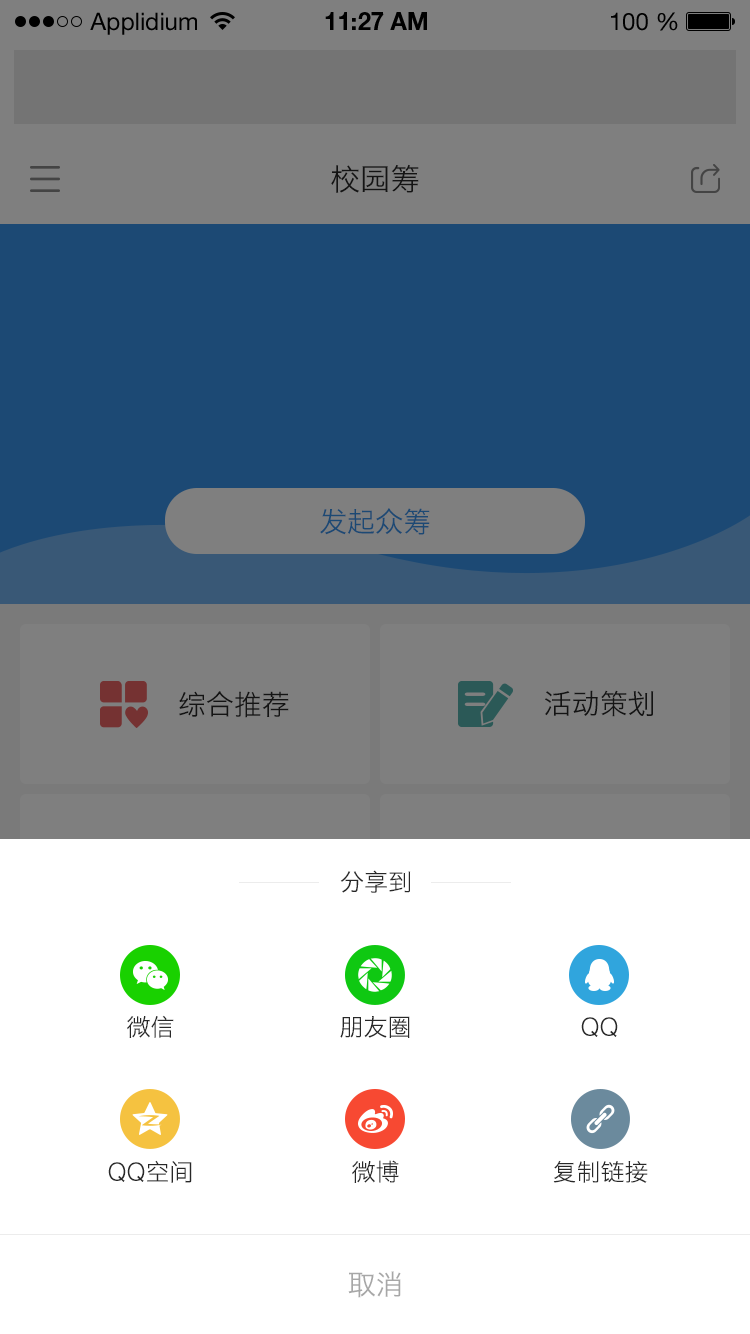
<style>
.page{position:relative;width:750px;height:1334px;background:#ffffff}
.page>*{position:absolute;margin:0}
.t1{font:24px "HiraginoSansGB-W3";color:#282828}
.t2{font:28px "HiraginoSansGB-W3";color:#a7a7a7}
</style>
<div class="page">
<p class="t1" style="left:340px;top:870px;width:71px;height:23px">分享到</p>
<p class="t1" style="left:127px;top:1015px;width:47px;height:23px">微信</p>
<p class="t1" style="left:340px;top:1016px;width:70px;height:22px">朋友圈</p>
<p class="t1" style="left:581px;top:1017px;width:37px;height:20px">QQ</p>
<p class="t1" style="left:108px;top:1160px;width:84px;height:23px">QQ空间</p>
<p class="t1" style="left:352px;top:1160px;width:47px;height:23px">微博</p>
<p class="t1" style="left:553px;top:1160px;width:95px;height:23px">复制链接</p>
<p class="t2" style="left:348px;top:1271px;width:53px;height:27px">取消</p>
</div>
